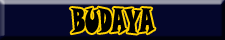
<style>
.page{position:relative;width:225px;height:40px;background:#04062b}
.page>*{position:absolute;margin:0}
.t1{font:33.3px "SnapITC-Regular";color:#000000;scale:0.5 1}
</style>
<div class="page">
<p class="t1" style="left:70px;top:7px;width:85px;height:27px">BUDAYA</p>
</div>
